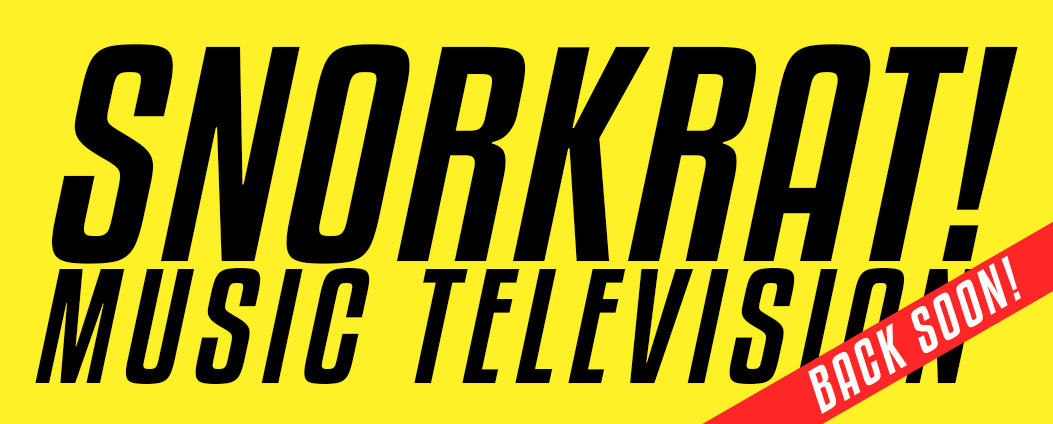
<style>
.page{position:relative;width:1053px;height:424px;background:#fef127}
.page>*{position:absolute;margin:0}
.t1{font:271.2px "KenyanCoffeeRg-Italic";letter-spacing:0.02em;color:#000000}
.t2{font:55px "KenyanCoffeeRg-Italic";letter-spacing:0.075em;color:#ffffff}
.t3{font:145.4px "KenyanCoffeeRg-Italic";letter-spacing:0.075em;color:#000000}
</style>
<div class="page">
<p class="t1" style="left:51px;top:44px;width:967px;height:220px">SNORKRAT!</p>
<p class="t2" style="left:808px;top:255px;width:213px;height:159px;rotate:-30deg">BACK SOON!</p>
<p class="t3" style="left:35px;top:268px;width:945px;height:116px">MUSIC TELEVISION</p>
</div>
